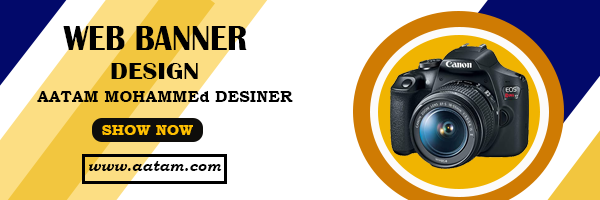
<style>
.page{position:relative;width:600px;height:200px;background:#ffffff}
.page>*{position:absolute;margin:0}
.t1{font:35.6px "BritannicBold";color:#000000;scale:0.89 1}
.t2{font:24.1px "BritannicBold";color:#000000;scale:1.13 1}
.t3{font:16.1px "BookmanOldStyle-Bold";color:#000000}
.t4{font:15.2px "BookmanOldStyle-Bold";color:#febf01}
.t5{font:15.2px "BookmanOldStyle-BoldItalic";color:#030303}
</style>
<div class="page">
<p class="t1" style="left:63px;top:26px;width:184px;height:24px">WEB BANNER</p>
<p class="t2" style="left:111px;top:63px;width:87px;height:16px">DESIGN</p>
<p class="t3" style="left:37px;top:91px;width:256px;height:11px">AATAM MOHAMMEd DESINER</p>
<p class="t4" style="left:102px;top:125px;width:91px;height:10px">SHOW NOW</p>
<p class="t5" style="left:89px;top:161px;width:133px;height:10px">www.aatam.com</p>
</div>
